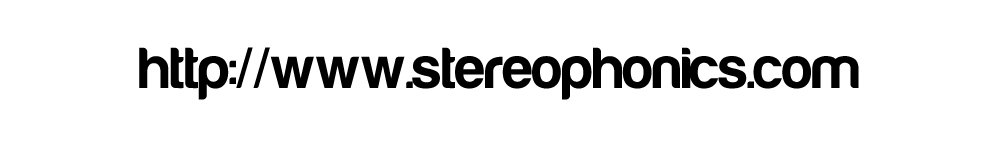
<style>
.page{position:relative;width:1000px;height:150px;background:#ffffff}
.page>*{position:absolute;margin:0}
.t1{font:60px "Harabara-Bold";color:#000000}
</style>
<div class="page">
<p class="t1" style="left:139px;top:47px;width:720px;height:53px">http://www.stereophonics.com</p>
</div>
